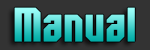
<style>
.page{position:relative;width:150px;height:50px;background:#333333}
.page>*{position:absolute;margin:0}
.t1{font:47.9px "Whitestone-Bold"}
</style>
<div class="page">
<p class="t1" style="left:14px;top:7px;width:121px;height:35px">Manual</p>
</div>
